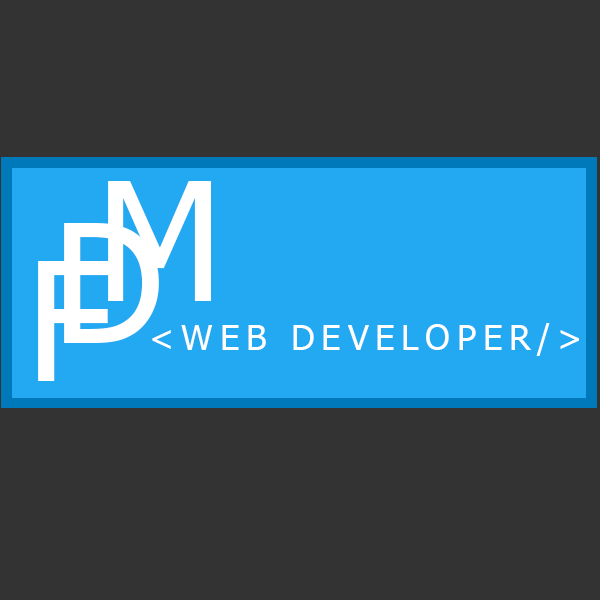
<style>
.page{position:relative;width:600px;height:600px;background:#333333}
.page>*{position:absolute;margin:0}
.t1{font:164.8px "Tahoma";letter-spacing:0.2em;color:#ffffff;text-transform:uppercase}
.t2{font:34.6px "Tahoma";letter-spacing:0.2em;color:#ffffff;text-transform:uppercase}
</style>
<div class="page">
<p class="t1" style="left:108px;top:181px;width:103px;height:120px">M</p>
<p class="t1" style="left:64px;top:223px;width:95px;height:120px">D</p>
<p class="t1" style="left:38px;top:261px;width:72px;height:120px">F</p>
<p class="t2" style="left:152px;top:323px;width:427px;height:33px">&lt;web developer/&gt;</p>
</div>
